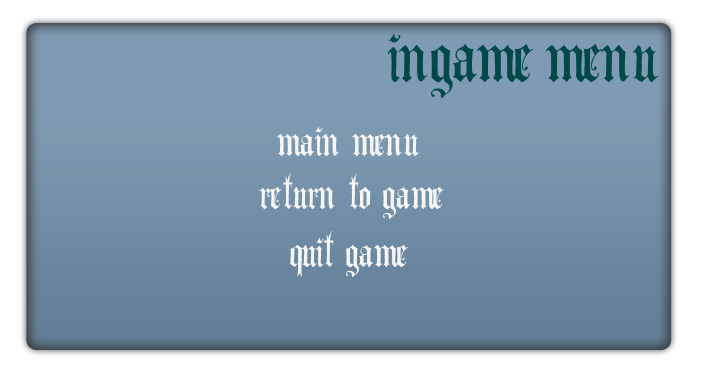
<style>
.page{position:relative;width:707px;height:377px}
.page>*{position:absolute;margin:0}
.t1{font:100px "AngloText";color:#004948}
.t2{font:60px "AngloText";color:#f6f6f6}
</style>
<div class="page">
<p class="t1" style="left:388px;top:34px;width:271px;height:64px">ingame menu</p>
<p class="t2" style="left:277px;top:127px;width:143px;height:29px">main menu</p>
<p class="t2" style="left:259px;top:173px;width:185px;height:46px">return to game</p>
<p class="t2" style="left:290px;top:231px;width:118px;height:46px">quit game</p>
</div>
